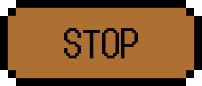
<style>
.page{position:relative;width:202px;height:86px;background:#ae6f32}
.page>*{position:absolute;margin:0}
.t1{font:36px "DotGothic16-Regular";color:#000000;font-weight:bold}
</style>
<div class="page">
<p class="t1" style="left:64px;top:28px;width:74px;height:31px">STOP</p>
</div>
